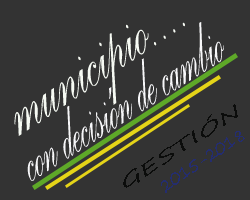
<style>
.page{position:relative;width:250px;height:200px;background:#333333}
.page>*{position:absolute;margin:0}
.t1{font:121.2px "PalaceScriptMT";color:#f6faf3;scale:0.59 1}
.t2{font:103.1px "PalaceScriptMT";color:#f7f7f9;scale:0.46 1}
.t3{font:16.7px "SegoePrint";color:#0b0c0b;scale:1.79 1}
.t4{font:18px "SegoePrint";color:#242d6f;scale:0.85 1}
</style>
<div class="page">
<p class="t1" style="left:14px;top:22px;width:171px;height:114px;rotate:-34deg">municipio....</p>
<p class="t2" style="left:27px;top:22px;width:197px;height:159px;rotate:-32deg">con decisión de cambio</p>
<p class="t3" style="left:123px;top:104px;width:115px;height:84px;rotate:-33deg">GESTIÓN</p>
<p class="t4" style="left:161px;top:131px;width:84px;height:62px;rotate:-34deg">2015-2018</p>
</div>
